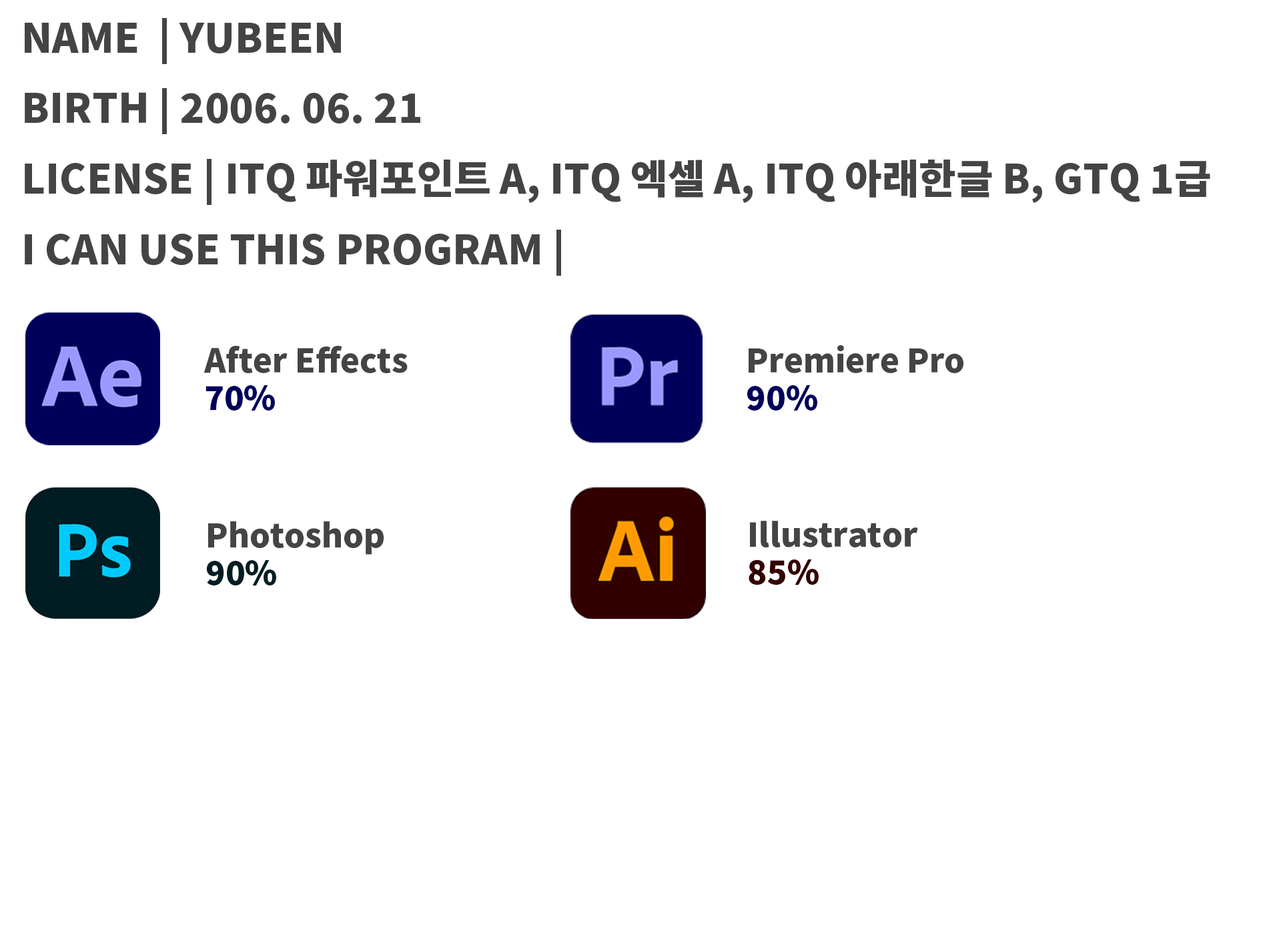
<style>
.page{position:relative;width:1261px;height:946px;background:#ffffff}
.page>*{position:absolute;margin:0}
.t1{font:40.3px "NotoSansCJKkr-Black";color:#444444}
.t2{font:32.5px/37.2px "NotoSansCJKkr-Black";color:#444444}
.t3{font:32.5px/37.2px "NotoSansCJKkr-Black";color:#00005b}
.t4{font:32.5px/37.2px "NotoSansCJKkr-Black";color:#001d23}
.t5{font:32.5px/37.2px "NotoSansCJKkr-Black";color:#330000}
</style>
<div class="page">
<p class="t1" style="left:25px;top:18px;width:1185px;height:258px">NAME  | YUBEEN<br>BIRTH | 2006. 06. 21<br>LICENSE | ITQ 파워포인트 A, ITQ 엑셀 A, ITQ 아래한글 B, GTQ 1급<br>I CAN USE THIS PROGRAM |</p>
<p class="t2" style="left:204px;top:346px;width:204px;height:64px">After Effects<br><span class="t3">70%</span></p>
<p class="t2" style="left:747px;top:345px;width:217px;height:65px">Premiere Pro<br><span class="t3">90%</span></p>
<p class="t2" style="left:206px;top:520px;width:178px;height:65px">Photoshop<br><span class="t4">90%</span></p>
<p class="t2" style="left:749px;top:520px;width:169px;height:65px">Illustrator<br><span class="t5">85%</span></p>
</div>
